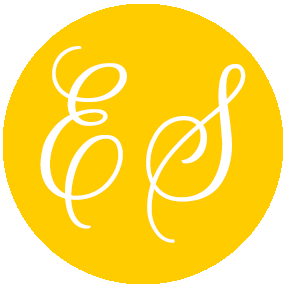
<style>
.page{position:relative;width:288px;height:288px;background:#ffcc00}
.page>*{position:absolute;margin:0}
.t1{font:180.9px "RougeScript-Regular";color:#ffffff}
</style>
<div class="page">
<p class="t1" style="left:40px;top:46px;width:206px;height:197px">ES</p>
</div>
